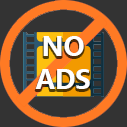
<style>
.page{position:relative;width:127px;height:127px;background:#333333}
.page>*{position:absolute;margin:0}
.t1{font:27.6px "Ebrima-Bold";color:#ffffff}
</style>
<div class="page">
<p class="t1" style="left:35px;top:36px;width:55px;height:53px;text-align:center">NO<br>ADS</p>
</div>
